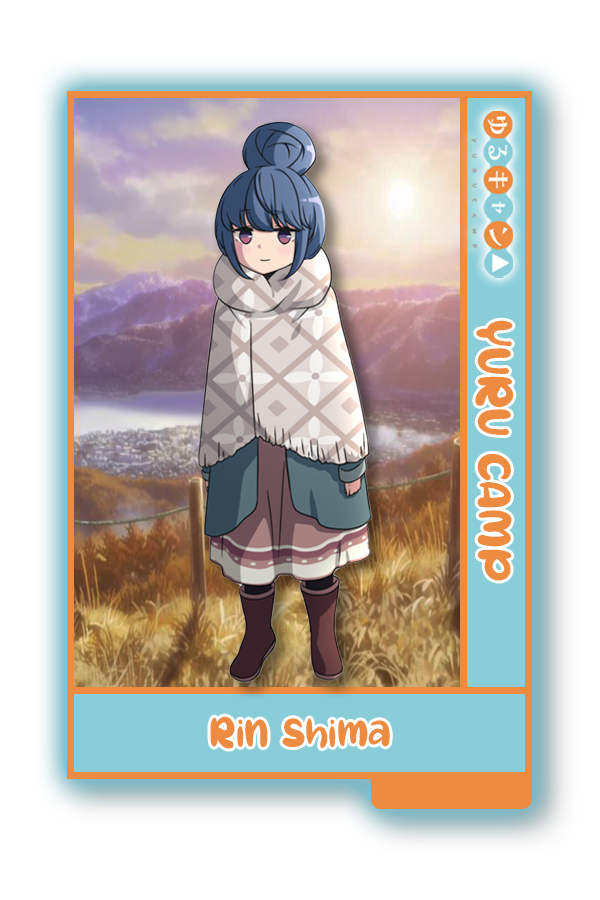
<style>
.page{position:relative;width:600px;height:900px;background:#ffffff}
.page>*{position:absolute;margin:0}
.t1{font:48.8px "OhMyBaby";color:#ed8c41}
.t2{font:41.1px "OhMyBaby";color:#ed8c41;scale:0.94 1}
</style>
<div class="page">
<p class="t1" style="left:475px;top:320px;width:39px;height:261px;rotate:90deg">YURU CAMP</p>
<p class="t2" style="left:210px;top:716px;width:180px;height:33px">Rin Shima</p>
</div>
